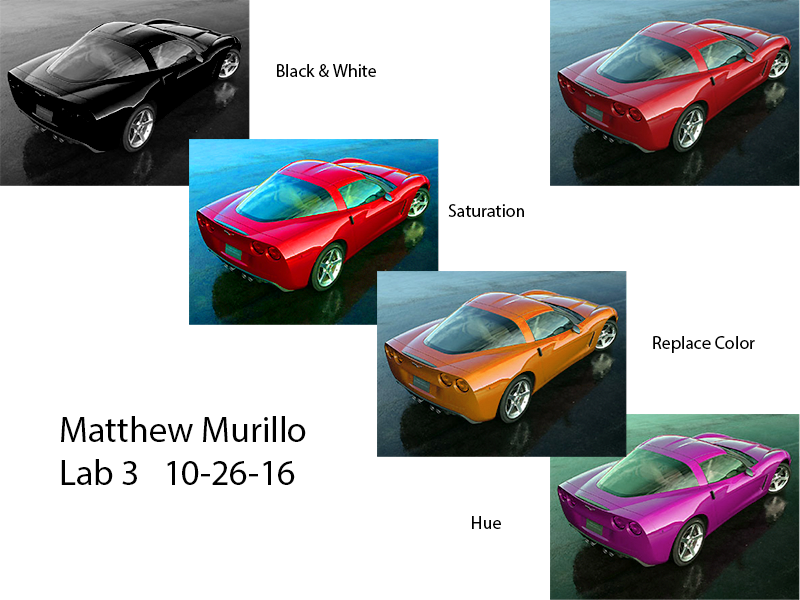
<style>
.page{position:relative;width:800px;height:600px;background:#ffffff}
.page>*{position:absolute;margin:0}
.t1{font:18px "MyriadPro-Regular";color:#000000}
.t2{font:36px "MyriadPro-Regular";color:#000000}
.t3{font:18px "MyriadPro-Regular";color:#010000}
</style>
<div class="page">
<p class="t1" style="left:277px;top:64px;width:99px;height:13px">Black &amp; White</p>
<p class="t1" style="left:448px;top:204px;width:76px;height:13px">Saturation</p>
<p class="t1" style="left:653px;top:336px;width:102px;height:17px">Replace Color</p>
<p class="t2" style="left:61px;top:416px;width:245px;height:69px">Matthew Murillo<br>Lab 3   10-26-16</p>
<p class="t3" style="left:472px;top:516px;width:29px;height:13px">Hue</p>
</div>
